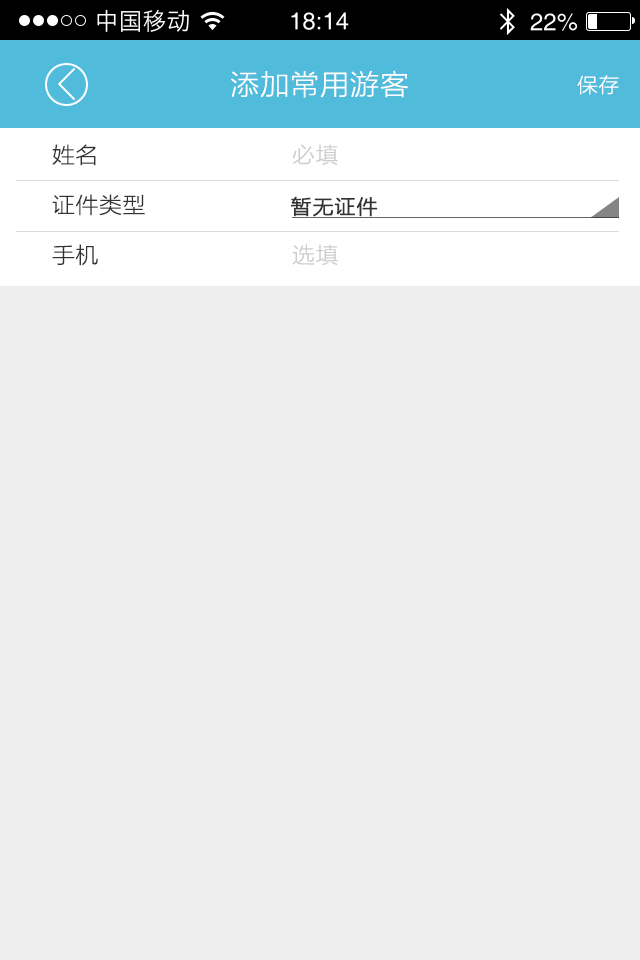
<style>
.page{position:relative;width:640px;height:960px;background:#ededed}
.page>*{position:absolute;margin:0}
.t1{font:28px "STHeitiSC-Light";letter-spacing:-0.04em;color:#ffffff;scale:1.03 1}
.t2{font:20px "STHeitiSC-Light";letter-spacing:-0.04em;color:#ffffff;scale:1.03 1}
.t3{font:22px/50px "STHeitiSC-Light";letter-spacing:-0.04em;color:#333333;scale:1.03 1}
.t4{font:22px/50px "STHeitiSC-Light";letter-spacing:-0.04em;color:#cccccc;scale:1.03 1}
.t5{font:20px "STHeitiSC-Light";letter-spacing:-0.04em;color:#333333;font-weight:bold;scale:1.03 1}
</style>
<div class="page">
<p class="t1" style="left:231px;top:70px;width:177px;height:28px">添加常用游客</p>
<p class="t2" style="left:577px;top:75px;width:42px;height:20px">保存</p>
<p class="t3" style="left:52px;top:144px;width:286px;height:122px">姓名                           <span class="t4">必填<br></span> 证件类型<br> 手机                           <span class="t4">选填</span></p>
<p class="t5" style="left:291px;top:196px;width:87px;height:21px">暂无证件</p>
</div>
